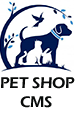
<style>
.page{position:relative;width:76px;height:113px;background:#ffffff}
.page>*{position:absolute;margin:0}
.t1{font:16px "ErasITC-Demi";color:#080a09}
</style>
<div class="page">
<p class="t1" style="left:1px;top:77px;width:74px;height:31px">PET SHOP<br>     CMS</p>
</div>
